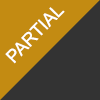
<style>
.page{position:relative;width:100px;height:100px;background:#333333}
.page>*{position:absolute;margin:0}
.t1{font:18px "ArialMT";color:#ffffff}
</style>
<div class="page">
<p class="t1" style="left:5px;top:7px;width:60px;height:57px;rotate:-46deg">PARTIAL</p>
</div>
